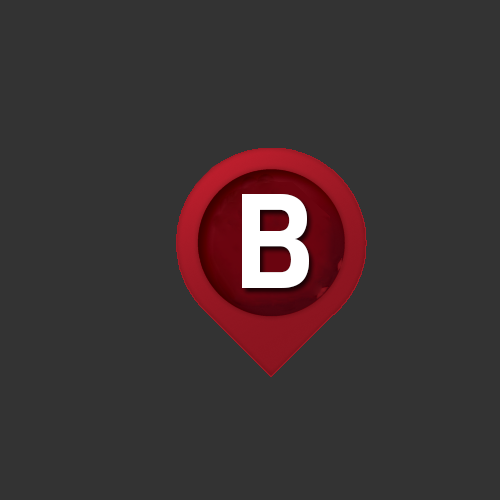
<style>
.page{position:relative;width:500px;height:500px;background:#333333}
.page>*{position:absolute;margin:0}
.t1{font:128.4px "Exo-Bold";color:#ffffff}
</style>
<div class="page">
<p class="t1" style="left:242px;top:194px;width:67px;height:94px">B</p>
</div>
